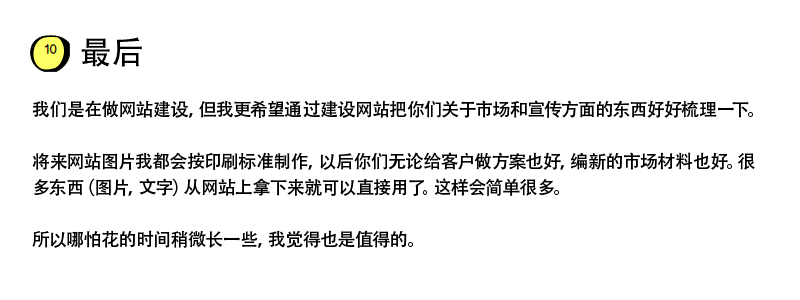
<style>
.page{position:relative;width:800px;height:300px;background:#ffffff}
.page>*{position:absolute;margin:0}
.t1{font:18px/26px "AdobeHeitiStd-Regular";color:#000000}
.t2{font:24px/36px "AdobeHeitiStd-Regular";color:#000000}
.t3{font:32px/36px "AdobeHeitiStd-Regular";color:#000000}
</style>
<div class="page">
<p class="t1" style="left:32px;top:37px;width:723px;height:211px"><span class="t2">         </span><span class="t3">最后<br></span><br>我们是在做网站建设，但我更希望通过建设网站把你们关于市场和宣传方面的东西好好梳理一下。<br><br>将来网站图片我都会按印刷标准制作，以后你们无论给客户做方案也好，编新的市场材料也好。很多东西（图片，文字）从网站上拿下来就可以直接用了。这样会简单很多。<br><br>所以哪怕花的时间稍微长一些，我觉得也是值得的。</p>
</div>
